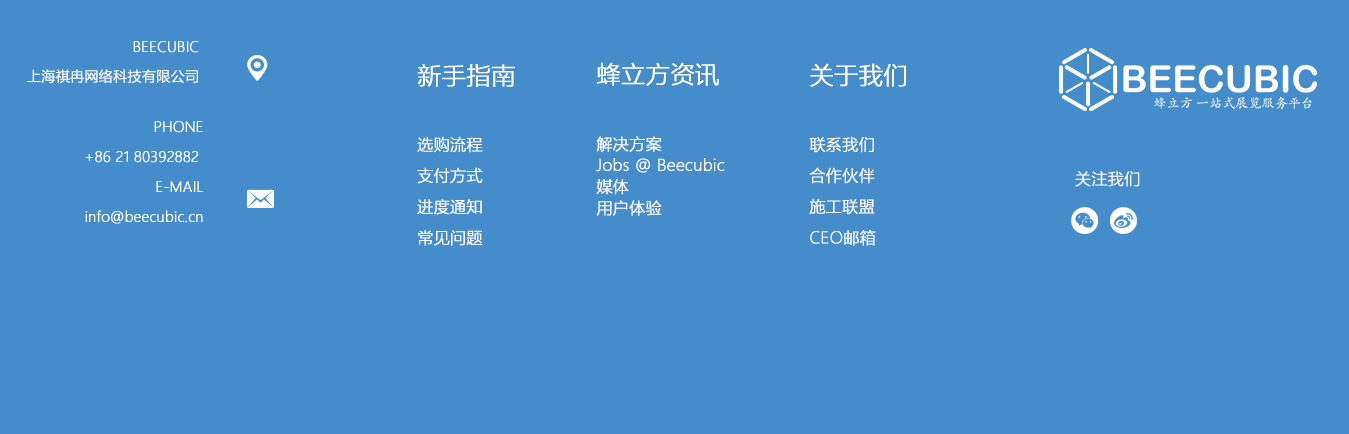
<style>
.page{position:relative;width:1349px;height:434px;background:#448cca}
.page>*{position:absolute;margin:0}
.t1{font:14px/30px "MicrosoftYaHeiLight";color:#ffffff;font-weight:bold}
.t2{font:14px/16px "MicrosoftYaHeiLight";color:#ffffff;font-weight:bold}
.t3{font:16px/31.1px "MicrosoftYaHeiLight";color:#ffffff;font-weight:bold}
.t4{font:24px/73.1px "MicrosoftYaHeiLight";color:#ffffff;font-weight:bold}
.t5{font:16px/21.3px "MicrosoftYaHeiLight";color:#ffffff;font-weight:bold}
.t6{font:24px/31.1px "MicrosoftYaHeiLight";color:#ffffff;font-weight:bold}
.t7{font:24px/21.3px "MicrosoftYaHeiLight";color:#ffffff;font-weight:bold}
.t8{font:14px "MicrosoftYaHeiLight";color:#ffffff;font-weight:bold}
.t9{font:16px "MicrosoftYaHeiLight";color:#ffffff;font-weight:bold}
</style>
<div class="page">
<p class="t1" style="left:85px;top:41px;width:119px;height:183px;text-align:right"><span class="t2">BEECUBIC <br><br><br><br><br></span>PHONE<br>+86 21 80392882 <br>E-MAIL<br>info@beecubic.cn</p>
<p class="t3" style="left:417px;top:64px;width:98px;height:182px"><span class="t4">新手指南<br></span>选购流程<br>支付方式<br>进度通知<br>常见问题</p>
<p class="t5" style="left:596px;top:62px;width:129px;height:154px"><span class="t6">蜂</span><span class="t7">立方资讯<br><br></span><br>解决方案<br>Jobs @ Beecubic<br>媒体<br>用户体验</p>
<p class="t3" style="left:809px;top:63px;width:97px;height:183px"><span class="t4">关于我们<br></span>联系我们<br>合作伙伴<br>施工联盟<br>CEO邮箱</p>
<p class="t8" style="left:27px;top:69px;width:171px;height:14px">上海祺冉网络科技有限公司</p>
<p class="t9" style="left:1075px;top:171px;width:65px;height:16px">关注我们</p>
</div>
